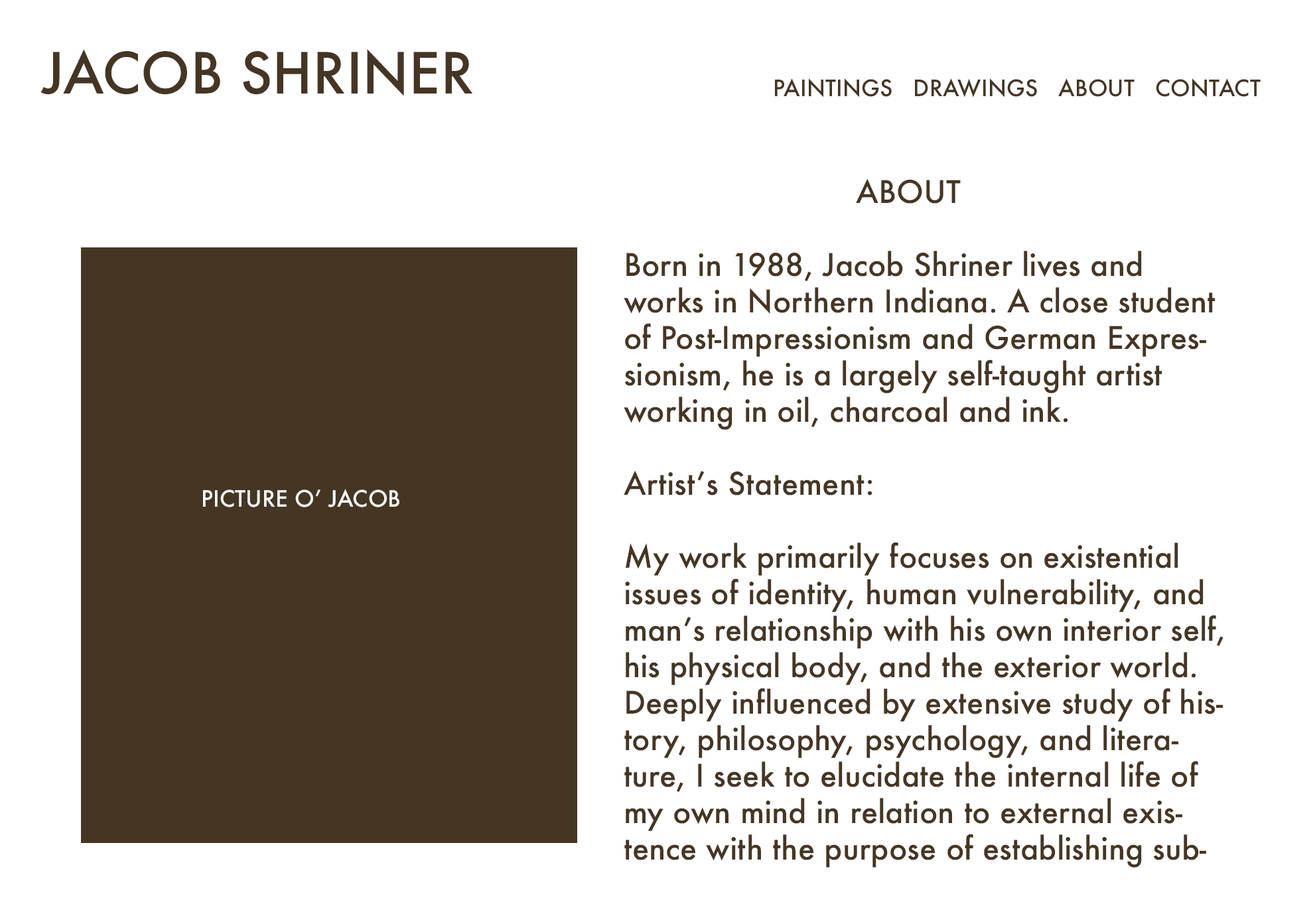
<style>
.page{position:relative;width:1313px;height:908px;background:#ffffff}
.page>*{position:absolute;margin:0}
.t1{font:55.3px "Futura-Medium";color:#453624}
.t2{font:22.1px "Futura-Medium";color:#453624}
.t3{font:30.4px "Futura-Medium";color:#453624}
.t4{font:22.1px "Futura-Medium";color:#f9f7f4}
</style>
<div class="page">
<p class="t1" style="left:40px;top:49px;width:432px;height:47px">JACOB SHRINER</p>
<p class="t2" style="left:775px;top:78px;width:486px;height:20px">PAINTINGS   DRAWINGS   ABOUT   CONTACT</p>
<p class="t3" style="left:856px;top:178px;width:105px;height:26px">ABOUT</p>
<p class="t3" style="left:624px;top:251px;width:599px;height:617px">Born in 1988, Jacob Shriner lives and works in Northern Indiana. A close student of Post-Impressionism and German Expressionism, he is a largely self-taught artist working in oil, charcoal and ink.<br><br>Artist’s Statement:<br><br>My work primarily focuses on existential issues of identity, human vulnerability, and man’s relationship with his own interior self, his physical body, and the exterior world. Deeply influenced by extensive study of history, philosophy, psychology, and literature, I seek to elucidate the internal life of my own mind in relation to external existence with the purpose of establishing subjective meaning and greater self-awareness through systems of symbolic visual narratives exploring themes of isolation as an intellectual condition, anxiety as a consequence of conflict between the mind and physicality, and the complex, often troubling nature of sexuality and human relations.</p>
<p class="t4" style="left:203px;top:489px;width:196px;height:19px">PICTURE O’ JACOB</p>
</div>
